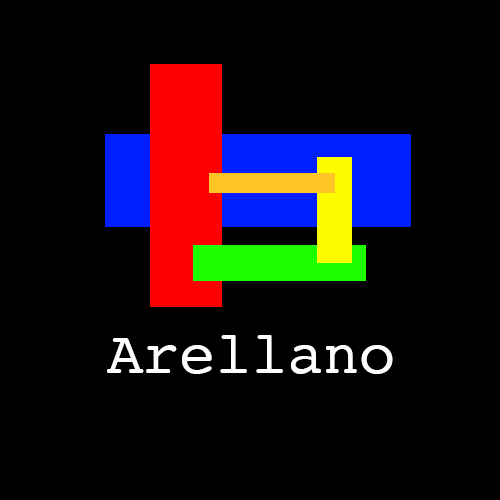
<style>
.page{position:relative;width:500px;height:500px;background:#000000}
.page>*{position:absolute;margin:0}
.t1{font:60px "Courier";color:#ffffff}
</style>
<div class="page">
<p class="t1" style="left:107px;top:335px;width:286px;height:39px">Arellano</p>
</div>
